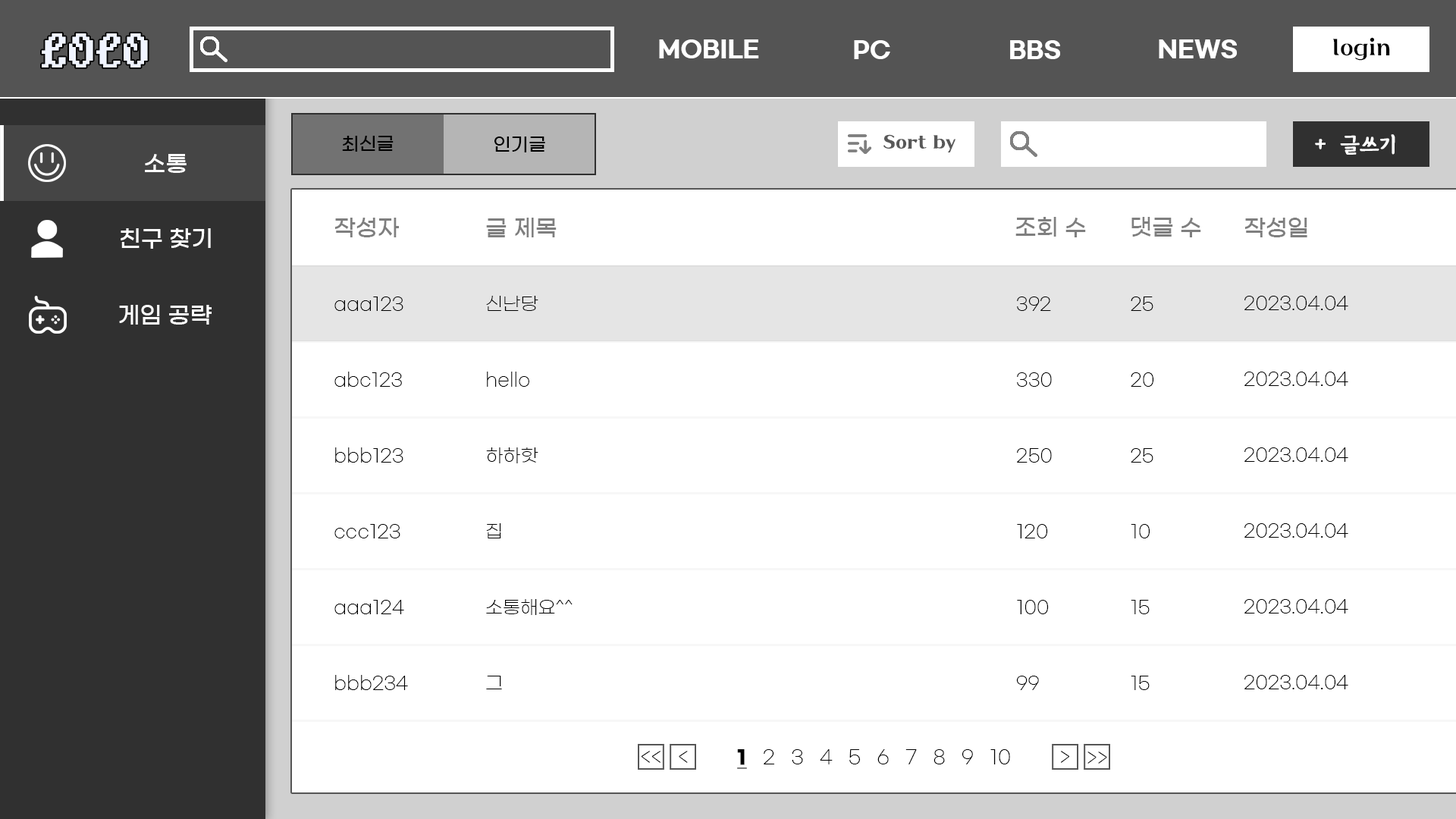
<style>
.page{position:relative;width:1456px;height:819px;background:#ffffff}
.page>*{position:absolute;margin:0}
.t1{font:54.6px "DOSPilgiMedium";color:#f0f4ff}
.t2{font:22.7px "GmarketSansTTFBold";color:#ffffff}
.t3{font:22.7px "HSBombaram2.1-Regular";color:#000000}
.t4{font:18.2px "GmarketSansTTFMedium";color:#000000}
.t5{font:18.2px "HSBombaram2.1-Regular";color:#585858;font-weight:bold}
.t6{font:22.7px "GangwonEduAllBold";color:#ffffff;font-weight:bold}
.t7{font:22.7px "GmarketSansTTFMedium";color:#ffffff}
.t8{font:22.7px "GmarketSansTTFMedium";color:#7f7f7f}
.t9{font:18.2px "GmarketSansTTFLight";color:#000000}
.t10{font:19.1px "GmarketSansTTFLight";color:#000000}
.t11{font:19.1px "GmarketSansTTFBold";color:#000000;font-weight:bold;text-decoration:underline}
</style>
<div class="page">
<p class="t1" style="left:42px;top:33px;width:106px;height:34px">LOCO</p>
<p class="t2" style="left:659px;top:39px;width:100px;height:19px">MOBILE</p>
<p class="t2" style="left:854px;top:40px;width:36px;height:19px">PC</p>
<p class="t2" style="left:1010px;top:40px;width:50px;height:19px">BBS</p>
<p class="t2" style="left:1159px;top:39px;width:78px;height:19px">NEWS</p>
<p class="t3" style="left:1333px;top:37px;width:57px;height:24px">login</p>
<p class="t4" style="left:342px;top:136px;width:52px;height:16px">최신글</p>
<p class="t4" style="left:494px;top:136px;width:51px;height:16px">인기글</p>
<p class="t5" style="left:883px;top:134px;width:72px;height:18px">Sort by</p>
<p class="t6" style="left:1315px;top:134px;width:80px;height:21px">+  글쓰기</p>
<p class="t7" style="left:145px;top:154px;width:42px;height:19px">소통</p>
<p class="t8" style="left:335px;top:218px;width:64px;height:19px">작성자</p>
<p class="t8" style="left:486px;top:218px;width:71px;height:19px">글 제목</p>
<p class="t8" style="left:1015px;top:217px;width:71px;height:20px">조회 수</p>
<p class="t8" style="left:1131px;top:217px;width:70px;height:20px">댓글 수</p>
<p class="t8" style="left:1245px;top:218px;width:62px;height:19px">작성일</p>
<p class="t7" style="left:121px;top:228px;width:90px;height:21px">친구 찾기</p>
<p class="t7" style="left:119px;top:305px;width:93px;height:20px">게임 공략</p>
<p class="t9" style="left:334px;top:297px;width:69px;height:14px">aaa123</p>
<p class="t9" style="left:486px;top:296px;width:52px;height:15px">신난당</p>
<p class="t9" style="left:1017px;top:297px;width:34px;height:14px">392</p>
<p class="t9" style="left:1131px;top:297px;width:22px;height:14px">25</p>
<p class="t9" style="left:1244px;top:296px;width:104px;height:14px">2023.04.04</p>
<p class="t9" style="left:334px;top:372px;width:68px;height:15px">abc123</p>
<p class="t9" style="left:487px;top:372px;width:42px;height:15px">hello</p>
<p class="t9" style="left:1017px;top:372px;width:35px;height:15px">330</p>
<p class="t9" style="left:1131px;top:372px;width:23px;height:15px">20</p>
<p class="t9" style="left:1244px;top:372px;width:104px;height:14px">2023.04.04</p>
<p class="t9" style="left:335px;top:447px;width:68px;height:16px">bbb123</p>
<p class="t9" style="left:486px;top:447px;width:52px;height:16px">하하핫</p>
<p class="t9" style="left:1017px;top:448px;width:35px;height:15px">250</p>
<p class="t9" style="left:1131px;top:448px;width:22px;height:15px">25</p>
<p class="t9" style="left:1244px;top:447px;width:104px;height:15px">2023.04.04</p>
<p class="t9" style="left:334px;top:524px;width:66px;height:14px">ccc123</p>
<p class="t9" style="left:486px;top:523px;width:15px;height:15px">집</p>
<p class="t9" style="left:1017px;top:524px;width:31px;height:14px">120</p>
<p class="t9" style="left:1131px;top:524px;width:19px;height:14px">10</p>
<p class="t9" style="left:1244px;top:523px;width:104px;height:15px">2023.04.04</p>
<p class="t9" style="left:334px;top:600px;width:70px;height:14px">aaa124</p>
<p class="t9" style="left:486px;top:599px;width:87px;height:16px">소통해요^^</p>
<p class="t9" style="left:1017px;top:600px;width:32px;height:14px">100</p>
<p class="t9" style="left:1131px;top:600px;width:19px;height:14px">15</p>
<p class="t9" style="left:1244px;top:599px;width:104px;height:14px">2023.04.04</p>
<p class="t9" style="left:335px;top:675px;width:73px;height:15px">bbb234</p>
<p class="t9" style="left:486px;top:676px;width:16px;height:13px">그</p>
<p class="t9" style="left:1016px;top:676px;width:23px;height:14px">99</p>
<p class="t9" style="left:1131px;top:676px;width:19px;height:14px">15</p>
<p class="t9" style="left:1244px;top:675px;width:104px;height:14px">2023.04.04</p>
<p class="t10" style="left:737px;top:749px;width:273px;height:20px"><span class="t11">1</span>   2   3   4   5   6   7   8   9   10</p>
<p class="t10" style="left:641px;top:751px;width:19px;height:12px">&lt;&lt;</p>
<p class="t10" style="left:679px;top:751px;width:9px;height:12px">&lt;</p>
<p class="t10" style="left:1061px;top:751px;width:8px;height:12px">&gt;</p>
<p class="t10" style="left:1087px;top:751px;width:20px;height:13px">&gt;&gt;</p>
</div>
